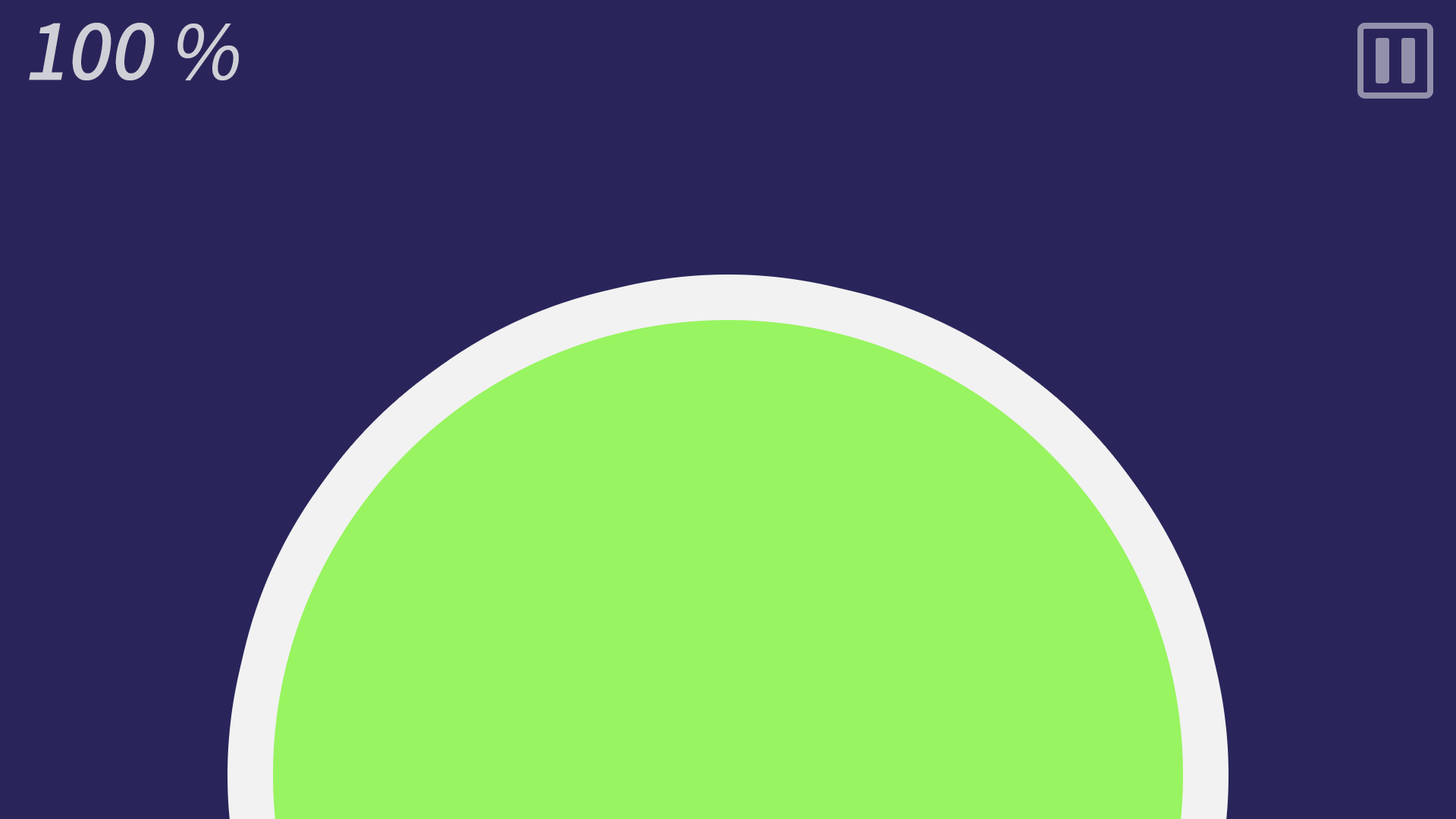
<style>
.page{position:relative;width:1456px;height:819px;background:#29255b}
.page>*{position:absolute;margin:0}
.t1{font:75.8px "NotoSansCJKkr-Medium";letter-spacing:-0.005em;color:#cfcfd7;font-style:italic}
.t2{font:75.8px "NotoSansCJKkr-Regular";letter-spacing:-0.005em;color:#cfcfd7;font-style:italic}
</style>
<div class="page">
<p class="t1" style="left:29px;top:23px;width:210px;height:57px">100 <span class="t2">%</span></p>
</div>
